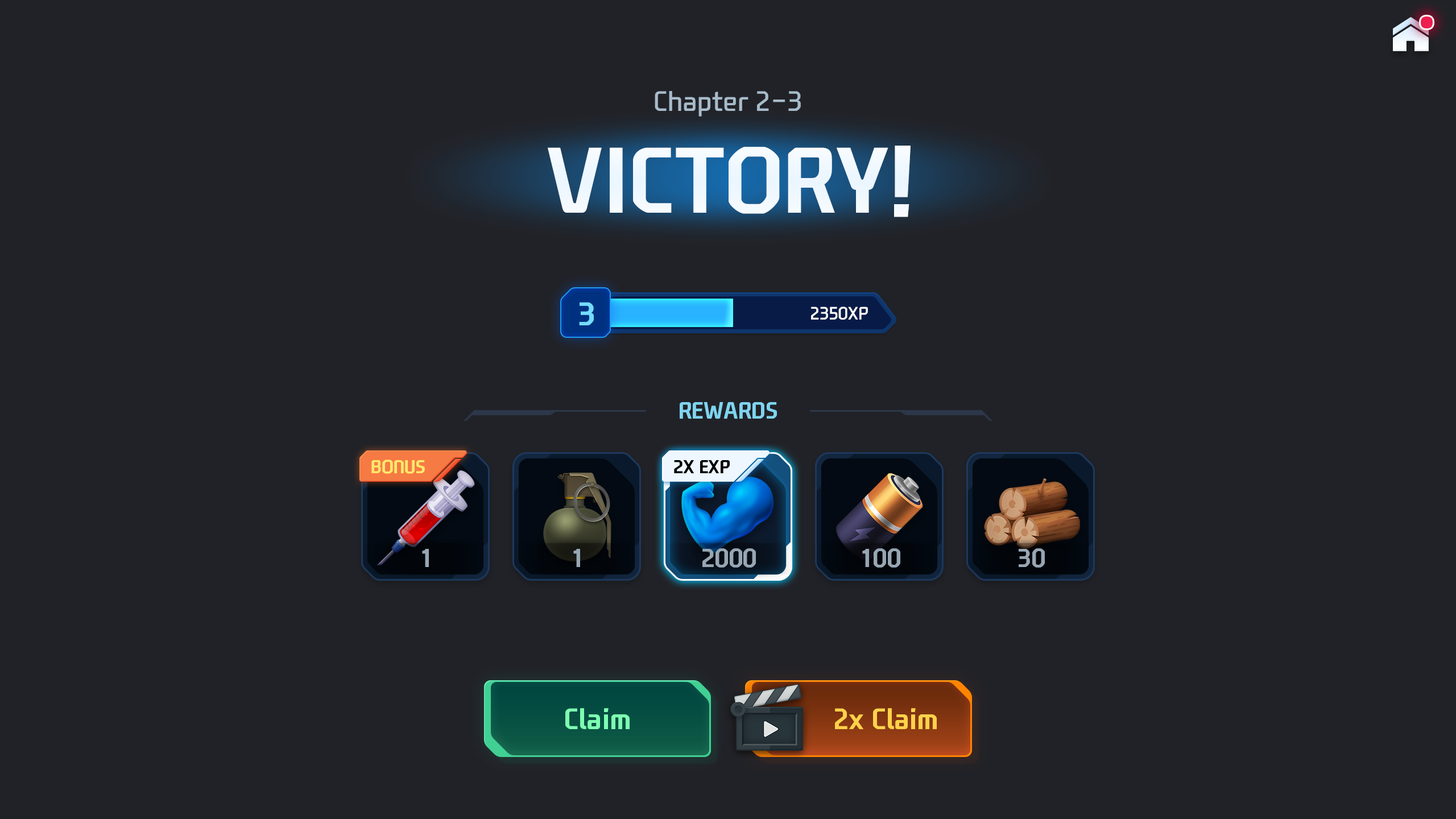
<style>
.page{position:relative;width:1456px;height:819px;background:#212227}
.page>*{position:absolute;margin:0}
.t1{font:27.3px "NEXONFootballGothicL";color:#a7bbca}
.t2{font:89.5px "NEXONFootballGothicB";color:#ffffff;text-transform:uppercase}
.t3{font:31.4px "NEXONFootballGothicB";color:#73dcff}
.t4{font:17.1px "NEXONFootballGothicL";color:#ffffff}
.t5{font:22.7px "NEXONFootballGothicB";color:#7fd4f0;text-transform:uppercase}
.t6{font:17.9px "NEXONFootballGothicB";color:#fde76b;text-transform:uppercase}
.t7{font:17.9px "NEXONFootballGothicB";color:#000000;text-transform:uppercase}
.t8{font:25px "NEXONFootballGothicB";color:#97a6b3;text-transform:uppercase}
.t9{font:28.4px "NEXONFootballGothicB";color:#7effb1}
.t10{font:28.4px "NEXONFootballGothicB";color:#ffd24a}
</style>
<div class="page">
<p class="t1" style="left:655px;top:91px;width:146px;height:26px">Chapter 2-3</p>
<p class="t2" style="left:548px;top:146px;width:363px;height:71px">victory!</p>
<p class="t3" style="left:579px;top:302px;width:15px;height:23px">3</p>
<p class="t4" style="left:811px;top:307px;width:57px;height:13px">2350XP</p>
<p class="t5" style="left:680px;top:402px;width:97px;height:17px">Rewards</p>
<p class="t6" style="left:371px;top:460px;width:54px;height:14px">Bonus</p>
<p class="t7" style="left:674px;top:460px;width:56px;height:14px">2x exp</p>
<p class="t8" style="left:422px;top:549px;width:7px;height:18px">1</p>
<p class="t8" style="left:573px;top:549px;width:7px;height:18px">1</p>
<p class="t8" style="left:702px;top:548px;width:54px;height:20px">2000</p>
<p class="t8" style="left:862px;top:548px;width:38px;height:20px">100</p>
<p class="t8" style="left:1019px;top:548px;width:26px;height:20px">30</p>
<p class="t9" style="left:565px;top:708px;width:65px;height:21px">Claim</p>
<p class="t10" style="left:835px;top:708px;width:102px;height:21px">2x Claim</p>
</div>
